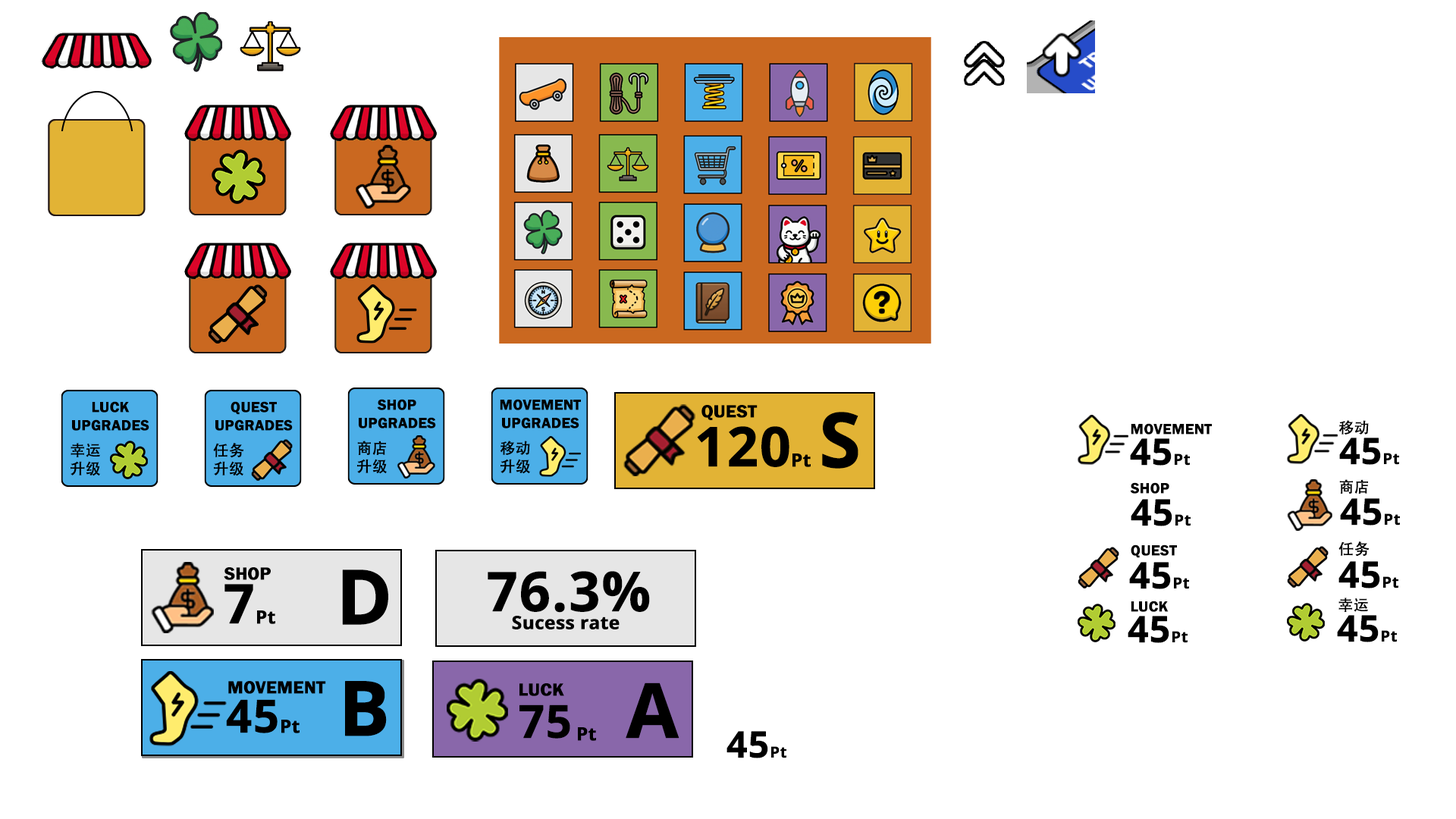
<style>
.page{position:relative;width:1456px;height:819px;background:#ffffff}
.page>*{position:absolute;margin:0}
.t1{font:15.2px "FranklinGothic-Demi";color:#000000;font-weight:bold}
.t2{font:18.2px "FranklinGothic-Demi";color:#000000;font-weight:bold}
.t3{font:75.8px "OpenSans-Bold";color:#000000;font-weight:bold}
.t4{font:15.2px "AdobeHeitiStd-Regular";color:#000000;font-weight:bold}
.t5{font:54.6px "OpenSans-Bold";color:#000000;font-weight:bold}
.t6{font:36.4px "OpenSans-Bold";color:#000000;font-weight:bold}
.t7{font:15.2px "OpenSans-Bold";color:#000000;font-weight:bold}
.t8{font:18.2px "OpenSans-Bold";color:#000000;font-weight:bold}
.t9{font:45.5px "OpenSans-Bold";color:#000000;font-weight:bold}
</style>
<div class="page">
<p class="t1" style="left:72px;top:401px;width:77px;height:30px;text-align:center">LUCK<br>UPGRADES</p>
<p class="t1" style="left:215px;top:401px;width:78px;height:30px;text-align:center">QUEST<br>UPGRADES</p>
<p class="t1" style="left:359px;top:399px;width:77px;height:29px;text-align:center">SHOP<br>UPGRADES</p>
<p class="t1" style="left:500px;top:399px;width:81px;height:29px;text-align:center">MOVEMENT<br>UPGRADES</p>
<p class="t2" style="left:701px;top:405px;width:57px;height:15px">QUEST</p>
<p class="t3" style="left:822px;top:412px;width:36px;height:57px">S</p>
<p class="t1" style="left:1131px;top:423px;width:81px;height:12px">MOVEMENT</p>
<p class="t4" style="left:1338px;top:420px;width:31px;height:15px">移动</p>
<p class="t5" style="left:697px;top:426px;width:92px;height:41px">120</p>
<p class="t6" style="left:1339px;top:438px;width:60px;height:27px">45<span class="t7">Pt</span></p>
<p class="t4" style="left:71px;top:443px;width:29px;height:33px;text-align:center">幸运<br>升级</p>
<p class="t4" style="left:213px;top:443px;width:31px;height:33px;text-align:center">任务<br>升级</p>
<p class="t4" style="left:357px;top:441px;width:30px;height:33px;text-align:center">商店<br>升级</p>
<p class="t4" style="left:500px;top:441px;width:30px;height:33px;text-align:center">移动<br>升级</p>
<p class="t6" style="left:1130px;top:438px;width:60px;height:28px">45<span class="t7">Pt</span></p>
<p class="t8" style="left:792px;top:453px;width:19px;height:14px">Pt</p>
<p class="t1" style="left:1130px;top:482px;width:39px;height:12px">SHOP</p>
<p class="t4" style="left:1339px;top:479px;width:29px;height:15px">商店</p>
<p class="t6" style="left:1131px;top:499px;width:60px;height:27px">45<span class="t7">Pt</span></p>
<p class="t6" style="left:1340px;top:498px;width:60px;height:28px">45<span class="t7">Pt</span></p>
<p class="t1" style="left:1131px;top:544px;width:46px;height:14px">QUEST</p>
<p class="t4" style="left:1338px;top:541px;width:32px;height:16px">任务</p>
<p class="t2" style="left:224px;top:567px;width:47px;height:13px">SHOP</p>
<p class="t3" style="left:342px;top:570px;width:46px;height:55px">D</p>
<p class="t6" style="left:1129px;top:562px;width:60px;height:27px">45<span class="t7">Pt</span></p>
<p class="t6" style="left:1338px;top:561px;width:60px;height:27px">45<span class="t7">Pt</span></p>
<p class="t5" style="left:488px;top:571px;width:162px;height:42px">76.3%</p>
<p class="t5" style="left:224px;top:584px;width:29px;height:40px">7</p>
<p class="t1" style="left:1131px;top:601px;width:38px;height:11px">LUCK</p>
<p class="t4" style="left:1338px;top:598px;width:30px;height:14px">幸运</p>
<p class="t8" style="left:257px;top:610px;width:18px;height:14px">Pt</p>
<p class="t8" style="left:512px;top:616px;width:108px;height:13px">Sucess rate</p>
<p class="t6" style="left:1128px;top:616px;width:60px;height:27px">45<span class="t7">Pt</span></p>
<p class="t6" style="left:1337px;top:615px;width:60px;height:27px">45<span class="t7">Pt</span></p>
<p class="t2" style="left:228px;top:681px;width:98px;height:13px">MOVEMENT</p>
<p class="t3" style="left:345px;top:681px;width:42px;height:55px">B</p>
<p class="t2" style="left:519px;top:683px;width:45px;height:13px">LUCK</p>
<p class="t3" style="left:626px;top:682px;width:53px;height:57px">A</p>
<p class="t9" style="left:226px;top:699px;width:52px;height:34px">45</p>
<p class="t9" style="left:519px;top:704px;width:51px;height:35px">75</p>
<p class="t8" style="left:281px;top:720px;width:19px;height:13px">Pt</p>
<p class="t8" style="left:578px;top:727px;width:18px;height:14px">Pt</p>
<p class="t6" style="left:726px;top:731px;width:60px;height:27px">45<span class="t7">Pt</span></p>
</div>
